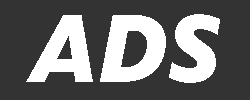
<style>
.page{position:relative;width:250px;height:100px;background:#333333}
.page>*{position:absolute;margin:0}
.t1{font:90.5px "Captura-BlackItalicDemo";color:#ffffff}
</style>
<div class="page">
<p class="t1" style="left:26px;top:14px;width:194px;height:69px">ADS</p>
</div>
